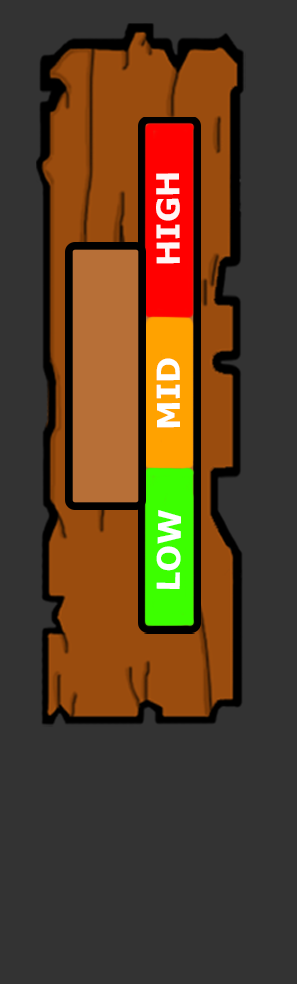
<style>
.page{position:relative;width:297px;height:984px;background:#333333}
.page>*{position:absolute;margin:0}
.t1{font:31.5px "Verdana-Bold";color:#fff6f6}
.t2{font:31.5px "Verdana-Bold";color:#ffffff}
</style>
<div class="page">
<p class="t1" style="left:156px;top:173px;width:24px;height:91px;rotate:-90deg">HIGH</p>
<p class="t2" style="left:156px;top:358px;width:24px;height:70px;rotate:-90deg">MID</p>
<p class="t2" style="left:156px;top:510px;width:25px;height:79px;rotate:-89deg">LOW</p>
</div>
